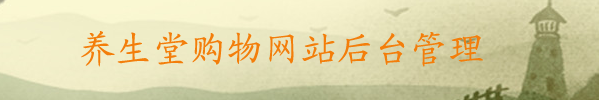
<style>
.page{position:relative;width:599px;height:100px}
.page>*{position:absolute;margin:0}
.t1{font:36px "KaiTi_GB2312";color:#f37e0b;font-weight:bold}
</style>
<div class="page">
<p class="t1" style="left:81px;top:31px;width:402px;height:36px">养生堂购物网站后台管理</p>
</div>
